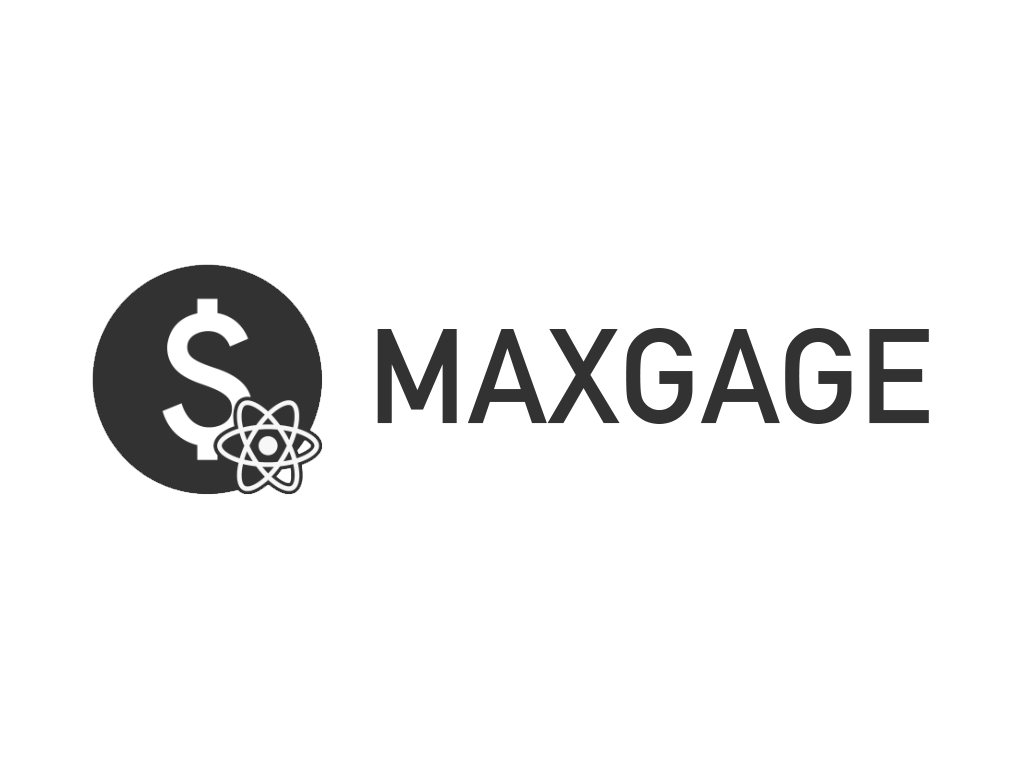
<style>
.page{position:relative;width:1024px;height:768px;background:#ffffff}
.page>*{position:absolute;margin:0}
.t1{font:132.4px "DINAlternate-Bold";color:#323232}
</style>
<div class="page">
<p class="t1" style="left:377px;top:328px;width:552px;height:96px">MAXGAGE</p>
</div>
